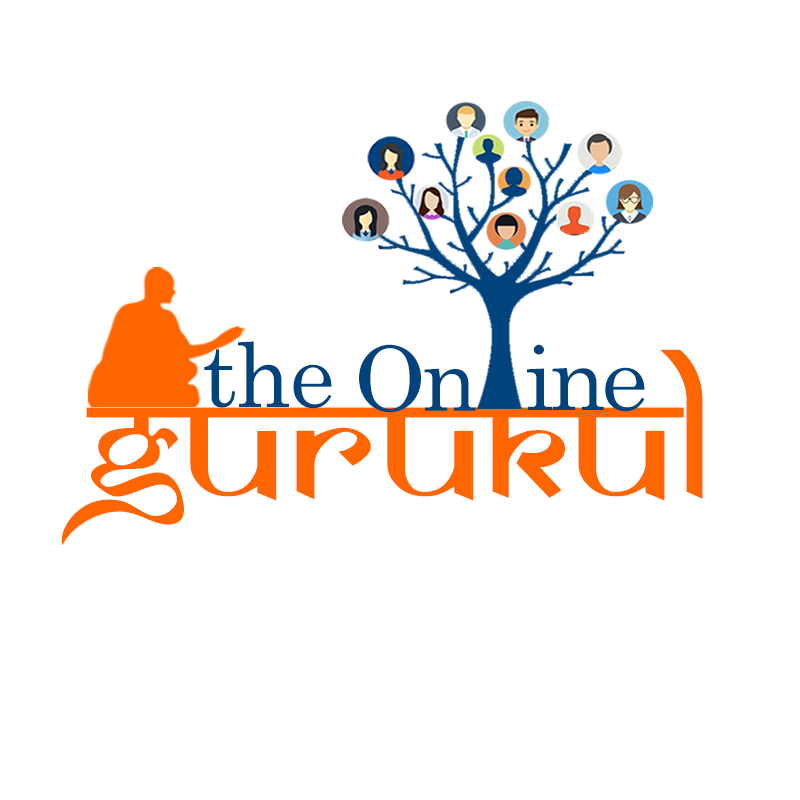
<style>
.page{position:relative;width:800px;height:800px;background:#ffffff}
.page>*{position:absolute;margin:0}
.t1{font:89.7px "CenturySchoolbook";letter-spacing:-0.01em;color:#01437d}
.t2{font:166.7px "SamarkanNormal";letter-spacing:0.01em;color:#ff6600;scale:1.13 1}
.t3{font:89.7px "CenturySchoolbook";letter-spacing:-0.05em;color:#01437d;scale:1.03 1}
</style>
<div class="page">
<p class="t1" style="left:204px;top:341px;width:128px;height:68px">the</p>
<p class="t2" style="left:61px;top:349px;width:655px;height:196px">gurukul</p>
<p class="t3" style="left:359px;top:344px;width:117px;height:69px">On</p>
<p class="t3" style="left:527px;top:344px;width:118px;height:68px">ine</p>
</div>
